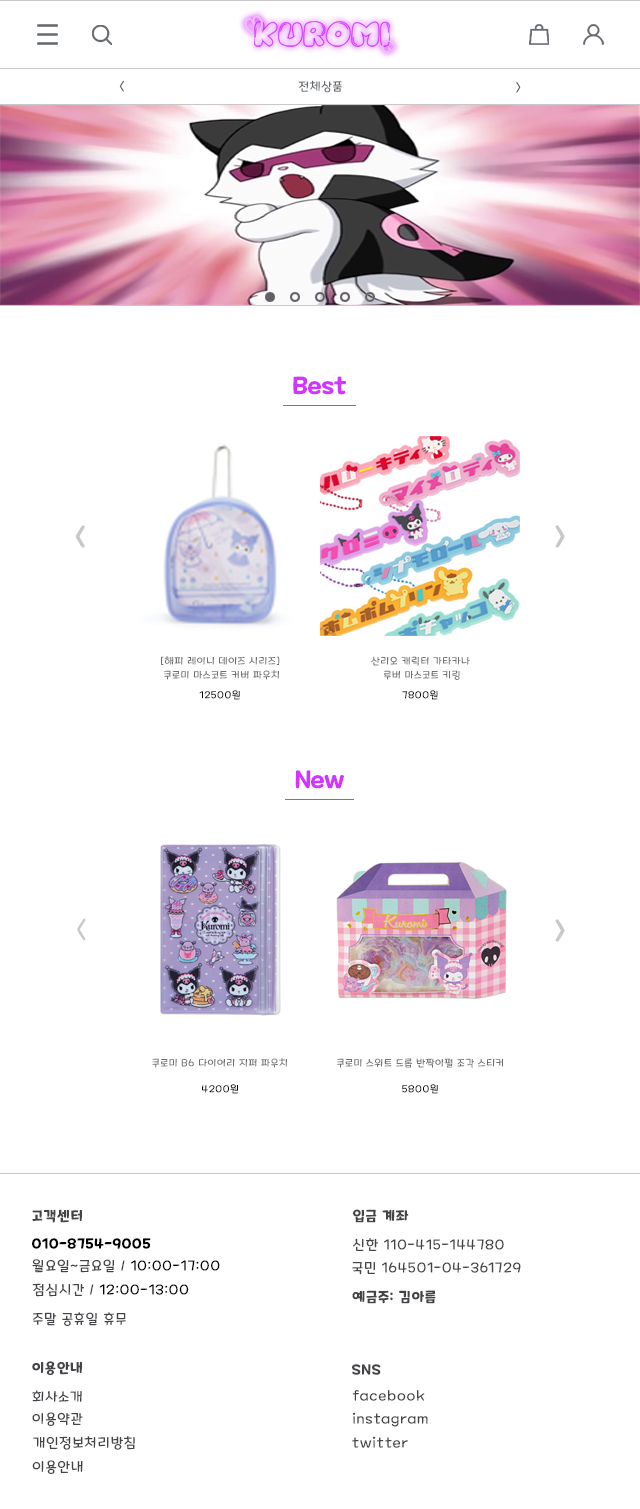
<style>
.page{position:relative;width:640px;height:1509px;background:#ffffff}
.page>*{position:absolute;margin:0}
.t1{font:12px "MaplestoryLight";letter-spacing:0.06em;color:#646165}
.t2{font:12px "MaplestoryLight";letter-spacing:0.06em;color:#676b71}
.t3{font:24px "MaplestoryBold";color:#d135ff}
.t4{font:24px "MaplestoryBold";color:#c9c7ca}
.t5{font:10px/14px "MaplestoryLight";letter-spacing:0.06em;color:#716d73}
.t6{font:10px "MaplestoryLight";letter-spacing:0.06em;color:#000000}
.t7{font:24px "MaplestoryLight";letter-spacing:0.06em;color:#c9c7ca}
.t8{font:10px "MaplestoryLight";letter-spacing:0.06em;color:#716d73}
.t9{font:14px "MaplestoryBold";letter-spacing:0.06em;color:#464348}
.t10{font:14px "MaplestoryBold";letter-spacing:0.06em;color:#000000}
.t11{font:14px "MaplestoryLight";letter-spacing:0.06em;color:#464348}
.t12{font:14px "MaplestoryLight";letter-spacing:0.06em;color:#000000}
</style>
<div class="page">
<p class="t1" style="left:119px;top:80px;width:5px;height:12px">&lt;</p>
<p class="t2" style="left:298px;top:80px;width:44px;height:13px">전체상품</p>
<p class="t1" style="left:516px;top:81px;width:5px;height:12px">&gt;</p>
<p class="t3" style="left:293px;top:376px;width:53px;height:19px">Best</p>
<p class="t4" style="left:75px;top:525px;width:10px;height:23px">&lt;</p>
<p class="t4" style="left:555px;top:525px;width:10px;height:23px">&gt;</p>
<p class="t5" style="left:161px;top:656px;width:119px;height:24px;text-align:center">[해피 레이니 데이즈 시리즈] <br>쿠로미 마스코트 커버 파우치</p>
<p class="t5" style="left:371px;top:656px;width:99px;height:24px;text-align:center">산리오 캐릭터 가타카나 <br>루버 마스코트 키링</p>
<p class="t6" style="left:199px;top:690px;width:41px;height:10px">12500원</p>
<p class="t6" style="left:402px;top:690px;width:36px;height:10px">7800원</p>
<p class="t3" style="left:295px;top:770px;width:49px;height:19px">New</p>
<p class="t7" style="left:77px;top:918px;width:9px;height:23px">&lt;</p>
<p class="t4" style="left:555px;top:919px;width:10px;height:23px">&gt;</p>
<p class="t8" style="left:152px;top:1058px;width:135px;height:10px">쿠로미 B6 다이어리 지퍼 파우치</p>
<p class="t8" style="left:337px;top:1058px;width:167px;height:10px">쿠로미 스위트 드롭 반짝이펄 조각 스티커</p>
<p class="t6" style="left:202px;top:1084px;width:36px;height:10px">4200원</p>
<p class="t6" style="left:402px;top:1084px;width:36px;height:10px">5800원</p>
<p class="t9" style="left:32px;top:1209px;width:50px;height:14px">고객센터</p>
<p class="t9" style="left:353px;top:1209px;width:56px;height:14px">입금 계좌</p>
<p class="t10" style="left:32px;top:1238px;width:119px;height:11px">010-8754-9005</p>
<p class="t11" style="left:352px;top:1238px;width:152px;height:13px">신한 110-415-144780</p>
<p class="t12" style="left:32px;top:1259px;width:188px;height:14px"><span class="t11">월요일~금요일 / </span>10:00-17:00</p>
<p class="t11" style="left:352px;top:1262px;width:169px;height:13px">국민 164501-04-361729</p>
<p class="t12" style="left:32px;top:1283px;width:157px;height:14px"><span class="t11">점심시간 / </span>12:00-13:00</p>
<p class="t9" style="left:352px;top:1290px;width:84px;height:14px">예금주: 김아름</p>
<p class="t11" style="left:33px;top:1312px;width:93px;height:14px">주말 공휴일 휴무</p>
<p class="t9" style="left:32px;top:1361px;width:50px;height:14px">이용안내</p>
<p class="t9" style="left:352px;top:1364px;width:29px;height:11px">SNS</p>
<p class="t11" style="left:32px;top:1390px;width:50px;height:12px">회사소개</p>
<p class="t11" style="left:352px;top:1390px;width:73px;height:11px">facebook</p>
<p class="t11" style="left:32px;top:1412px;width:51px;height:14px">이용약관</p>
<p class="t11" style="left:353px;top:1412px;width:75px;height:15px">instagram</p>
<p class="t11" style="left:33px;top:1436px;width:102px;height:14px">개인정보처리방침</p>
<p class="t11" style="left:352px;top:1436px;width:56px;height:12px">twitter</p>
<p class="t11" style="left:32px;top:1460px;width:51px;height:14px">이용안내</p>
</div>
